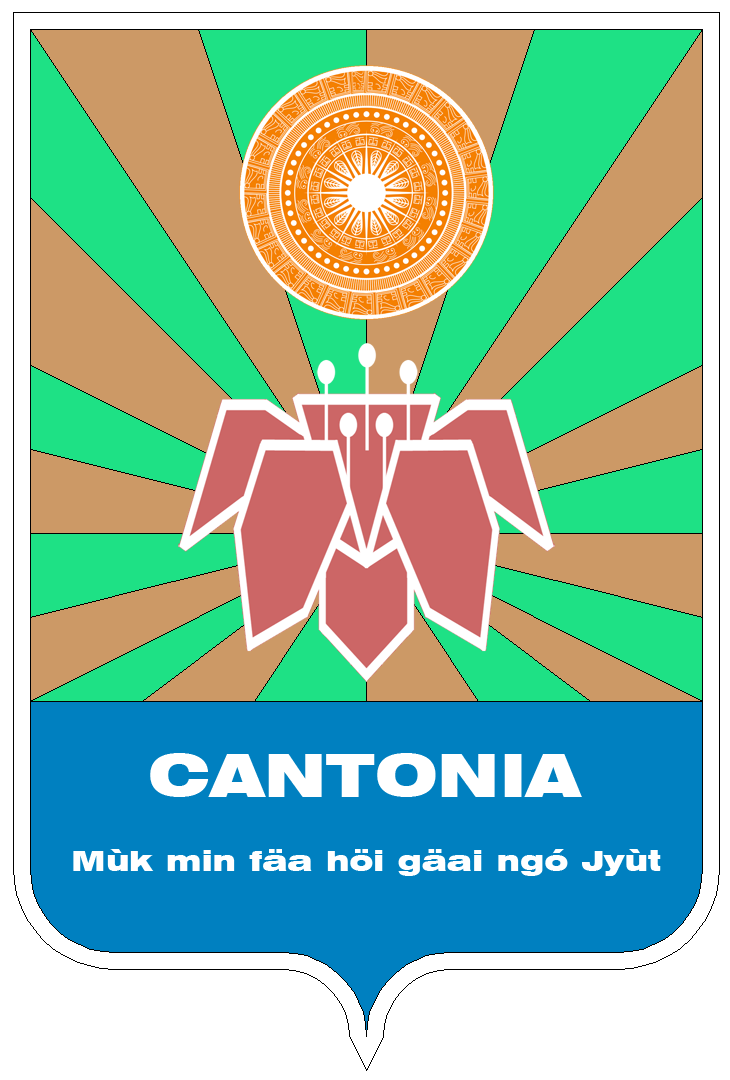
<style>
.page{position:relative;width:730px;height:1080px;background:#ffffff}
.page>*{position:absolute;margin:0}
.t1{font:60px "Swiss721BT-BlackExtended";color:#ffffff}
.t2{font:28px "Swiss721BT-BlackExtended";color:#ffffff}
</style>
<div class="page">
<p class="t1" style="left:150px;top:753px;width:432px;height:44px">CANTONIA</p>
<p class="t2" style="left:73px;top:849px;width:588px;height:27px">Mùk min fäa höi gäai ngó Jyùt</p>
</div>
